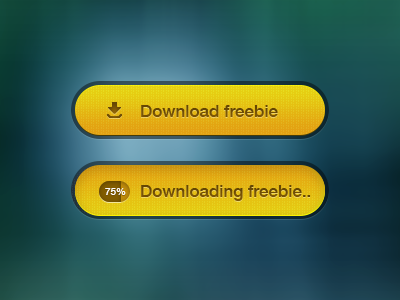
<style>
.page{position:relative;width:400px;height:300px}
.page>*{position:absolute;margin:0}
.t1{font:17px "HelveticaNeue-Medium";color:#6f4d04}
.t2{font:10px "HelveticaNeue-Medium";color:#ffffff}
</style>
<div class="page">
<p class="t1" style="left:141px;top:105px;width:137px;height:12px">Download freebie</p>
<p class="t1" style="left:141px;top:185px;width:170px;height:16px">Downloading freebie..</p>
<p class="t2" style="left:105px;top:188px;width:21px;height:7px">75%</p>
</div>
